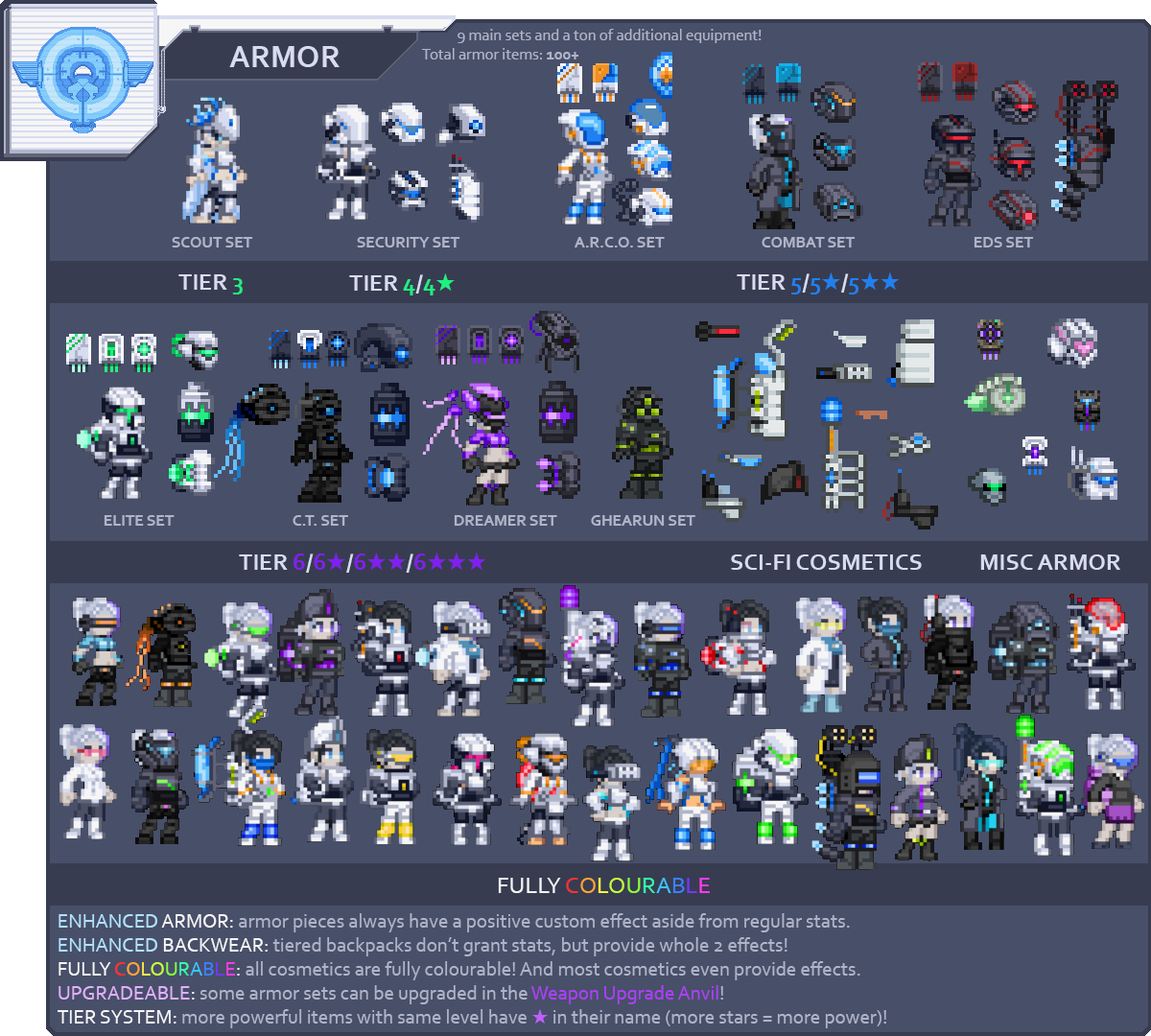
<style>
.page{position:relative;width:1151px;height:1036px;background:#484f69}
.page>*{position:absolute;margin:0}
.t1{font:16px "Corbel";color:#b0b4c8}
.t2{font:16px "Corbel-Bold";color:#b0b4c8}
.t3{font:32px "Corbel-Bold";color:#d8dcf0}
.t4{font:24px "Corbel-Bold";color:#d8dcf0}
.t5{font:24px "Corbel-Bold";color:#20f080}
.t6{font:24px "SegoeUISymbol";color:#20f080}
.t7{font:24px "Corbel-Bold";color:#2080f0}
.t8{font:24px "SegoeUISymbol";color:#2080f0}
.t9{font:24px "Corbel-Bold";color:#8020f0}
.t10{font:24px "SegoeUISymbol";color:#8020f0}
.t11{font:24px "Corbel";color:#f6f6f6}
.t12{font:24px "Corbel";color:#ff3232}
.t13{font:24px "Corbel";color:#ffa336}
.t14{font:24px "Corbel";color:#fff446}
.t15{font:24px "Corbel";color:#c7ff3f}
.t16{font:24px "Corbel";color:#89ff3b}
.t17{font:24px "Corbel";color:#34ffab}
.t18{font:24px "Corbel";color:#3ec2ff}
.t19{font:24px "Corbel";color:#3b80ff}
.t20{font:24px "Corbel";color:#7437ff}
.t21{font:24px "Corbel";color:#ff3aea}
.t22{font:20px "Corbel";color:#b0b4c8}
.t23{font:20px "Corbel";color:#b0e0fc}
.t24{font:20px "Corbel";color:#f6f6f6}
.t25{font:20px "Corbel";color:#ff3232}
.t26{font:20px "Corbel";color:#ffa336}
.t27{font:20px "Corbel";color:#fff446}
.t28{font:20px "Corbel";color:#c7ff3f}
.t29{font:20px "Corbel";color:#89ff3b}
.t30{font:20px "Corbel";color:#34ffab}
.t31{font:20px "Corbel";color:#3ec2ff}
.t32{font:20px "Corbel";color:#3b80ff}
.t33{font:20px "Corbel";color:#7437ff}
.t34{font:20px "Corbel";color:#ff3aea}
.t35{font:20px "Corbel";color:#e0b0fc}
.t36{font:20px "Corbel";color:#ad3ffa}
.t37{font:20px "SegoeUISymbol";color:#c060fc}
</style>
<div class="page">
<p class="t1" style="left:422px;top:29px;width:340px;height:30px">9 main sets and a ton of additional equipment!<br>Total armor items: <span class="t2">100+</span></p>
<p class="t3" style="left:229px;top:46px;width:111px;height:21px">ARMOR</p>
<p class="t2" style="left:172px;top:237px;width:81px;height:10px">SCOUT SET</p>
<p class="t2" style="left:357px;top:237px;width:103px;height:10px">SECURITY SET</p>
<p class="t2" style="left:575px;top:237px;width:90px;height:10px">A.R.C.O. SET</p>
<p class="t2" style="left:762px;top:237px;width:94px;height:10px">COMBAT SET</p>
<p class="t2" style="left:974px;top:237px;width:60px;height:10px">EDS SET</p>
<p class="t4" style="left:178px;top:274px;width:65px;height:20px">TIER <span class="t5">3</span></p>
<p class="t4" style="left:349px;top:273px;width:106px;height:22px">TIER <span class="t5">4</span>/<span class="t5">4</span><span class="t6">★</span></p>
<p class="t4" style="left:737px;top:272px;width:162px;height:22px">TIER <span class="t7">5</span>/<span class="t7">5</span><span class="t8">★</span>/<span class="t7">5</span><span class="t8">★★</span></p>
<p class="t2" style="left:104px;top:515px;width:71px;height:11px">ELITE SET</p>
<p class="t2" style="left:293px;top:515px;width:55px;height:11px">C.T. SET</p>
<p class="t2" style="left:454px;top:515px;width:103px;height:11px">DREAMER SET</p>
<p class="t2" style="left:591px;top:515px;width:104px;height:11px">GHEARUN SET</p>
<p class="t4" style="left:239px;top:553px;width:246px;height:20px">TIER <span class="t9">6</span>/<span class="t9">6</span><span class="t10">★</span>/<span class="t9">6</span><span class="t10">★★</span>/<span class="t9">6</span><span class="t10">★★★</span></p>
<p class="t4" style="left:731px;top:554px;width:191px;height:16px">SCI-FI COSMETICS</p>
<p class="t4" style="left:980px;top:554px;width:140px;height:16px">MISC ARMOR</p>
<p class="t11" style="left:498px;top:878px;width:212px;height:15px">FULLY <span class="t12">C</span><span class="t13">O</span><span class="t14">L</span><span class="t15">O</span><span class="t16">U</span><span class="t17">R</span><span class="t18">A</span><span class="t19">B</span><span class="t20">L</span><span class="t21">E</span></p>
<p class="t22" style="left:58px;top:913px;width:828px;height:115px"><span class="t23">ENHANCED</span><span class="t24"> ARMOR:</span> armor pieces always have a positive custom effect aside from regular stats.<br><span class="t23">ENHANCED</span><span class="t24"> BACKWEAR:</span> tiered backpacks don’t grant stats, but provide whole 2 effects!<br><span class="t24">FULLY </span><span class="t25">C</span><span class="t26">O</span><span class="t27">L</span><span class="t28">O</span><span class="t29">U</span><span class="t30">R</span><span class="t31">A</span><span class="t32">B</span><span class="t33">L</span><span class="t34">E</span><span class="t24">:</span> all cosmetics are fully colourable! And most cosmetics even provide effects.<br><span class="t35">UPGRADEABLE</span><span class="t24">:</span> some armor sets can be upgraded in the <span class="t36">Weapon Upgrade Anvil</span>!<br><span class="t24">TIER SYSTEM:</span> more powerful items with same level have <span class="t37">★</span> in their name (more stars = more power)!</p>
</div>
